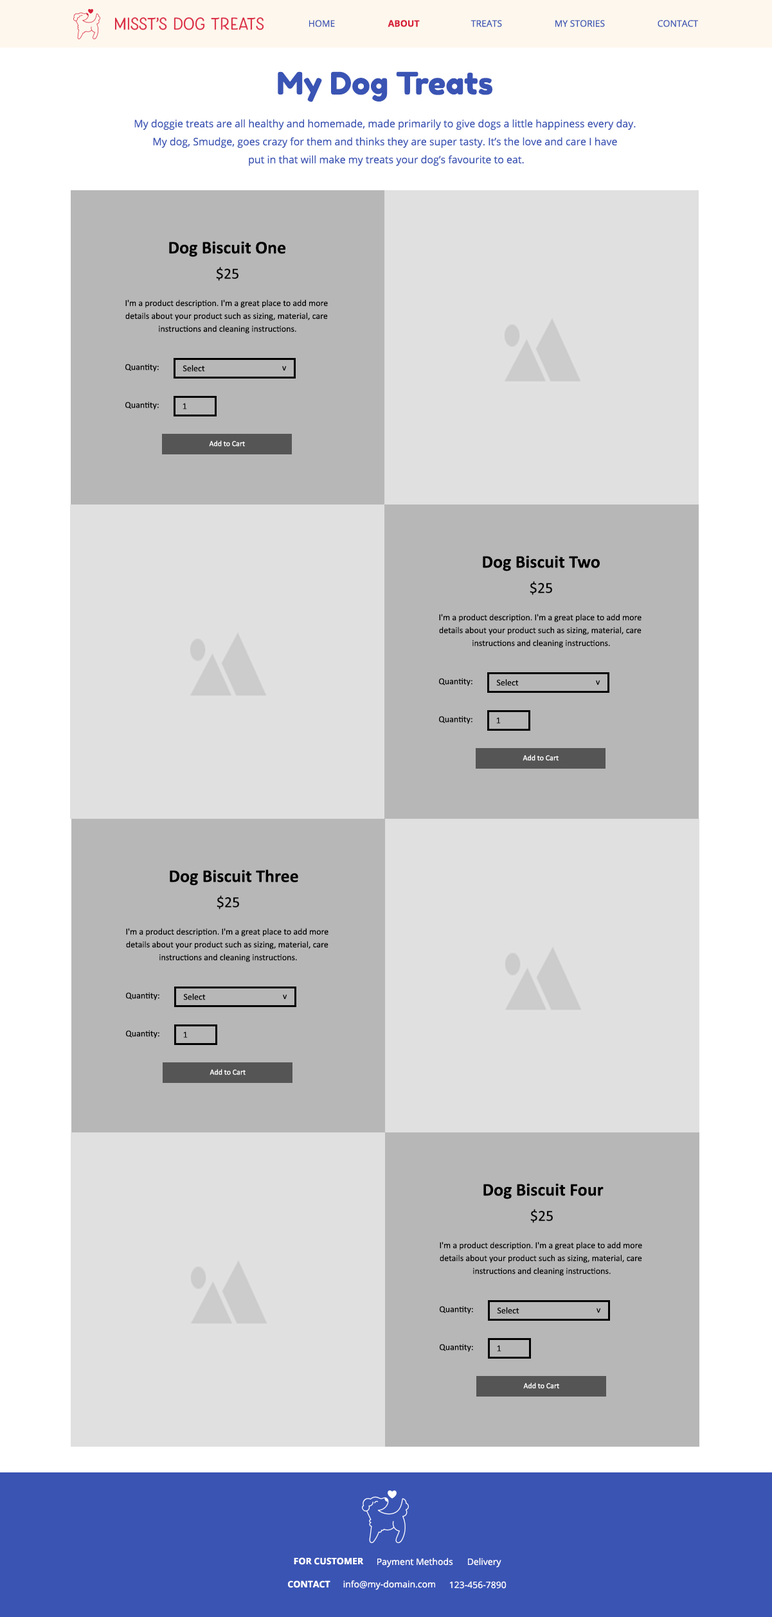
<style>
.page{position:relative;width:772px;height:1617px;background:#e0e0e0}
.page>*{position:absolute;margin:0}
.t1{font:9px "OpenSans-Regular";color:#3a54b4}
.t2{font:9px "OpenSans-Bold";color:#d71f38}
.t3{font:30.9px "FredokaOne-Regular";color:#3a54b4}
.t4{font:10.3px/18px "OpenSans-Regular";color:#3a54b4}
.t5{font:18px "Calibri-Bold";color:#000000}
.t6{font:15.4px "Calibri";color:#000000}
.t7{font:9px/12.9px "Calibri";color:#000000}
.t8{font:9px "Calibri";color:#000000}
.t9{font:7.7px "Calibri";color:#ffffff}
.t10{font:9px "OpenSans-Bold";color:#ffffff}
.t11{font:9px "OpenSans-Regular";color:#ffffff}
</style>
<div class="page">
<p class="t1" style="left:309px;top:20px;width:26px;height:7px">HOME</p>
<p class="t2" style="left:388px;top:20px;width:32px;height:7px">ABOUT</p>
<p class="t1" style="left:471px;top:20px;width:31px;height:7px">TREATS</p>
<p class="t1" style="left:555px;top:20px;width:50px;height:7px">MY STORIES</p>
<p class="t1" style="left:658px;top:20px;width:40px;height:7px">CONTACT</p>
<p class="t3" style="left:278px;top:71px;width:214px;height:31px">My Dog Treats</p>
<p class="t4" style="left:134px;top:119px;width:502px;height:47px;text-align:center">My doggie treats are all healthy and homemade, made primarily to give dogs a little happiness every day. <br>My dog, Smudge, goes crazy for them and thinks they are super tasty. It’s the love and care I have <br>put in that will make my treats your dog’s favourite to eat.</p>
<p class="t5" style="left:169px;top:241px;width:117px;height:16px">Dog Biscuit One</p>
<p class="t6" style="left:216px;top:267px;width:23px;height:14px">$25</p>
<p class="t7" style="left:125px;top:300px;width:203px;height:34px;text-align:center">I'm a product description. I'm a great place to add more <br>details about your product such as sizing, material, care <br>instructions and cleaning instructions.</p>
<p class="t8" style="left:125px;top:364px;width:34px;height:8px">Quantity:</p>
<p class="t8" style="left:183px;top:365px;width:22px;height:7px">Select</p>
<p class="t8" style="left:282px;top:366px;width:5px;height:5px">v</p>
<p class="t8" style="left:125px;top:402px;width:34px;height:8px">Quantity:</p>
<p class="t8" style="left:183px;top:403px;width:4px;height:7px">1</p>
<p class="t9" style="left:209px;top:440px;width:36px;height:7px">Add to Cart</p>
<p class="t5" style="left:483px;top:555px;width:117px;height:17px">Dog Biscuit Two</p>
<p class="t6" style="left:530px;top:581px;width:22px;height:14px">$25</p>
<p class="t7" style="left:439px;top:614px;width:203px;height:34px;text-align:center">I'm a product description. I'm a great place to add more <br>details about your product such as sizing, material, care <br>instructions and cleaning instructions.</p>
<p class="t8" style="left:439px;top:678px;width:34px;height:9px">Quantity:</p>
<p class="t8" style="left:496px;top:680px;width:23px;height:6px">Select</p>
<p class="t8" style="left:596px;top:680px;width:4px;height:5px">v</p>
<p class="t8" style="left:439px;top:716px;width:34px;height:8px">Quantity:</p>
<p class="t8" style="left:496px;top:717px;width:5px;height:7px">1</p>
<p class="t9" style="left:523px;top:755px;width:36px;height:6px">Add to Cart</p>
<p class="t5" style="left:170px;top:870px;width:128px;height:16px">Dog Biscuit Three</p>
<p class="t6" style="left:217px;top:896px;width:22px;height:14px">$25</p>
<p class="t7" style="left:126px;top:928px;width:202px;height:34px;text-align:center">I'm a product description. I'm a great place to add more <br>details about your product such as sizing, material, care <br>instructions and cleaning instructions.</p>
<p class="t8" style="left:126px;top:993px;width:33px;height:8px">Quantity:</p>
<p class="t8" style="left:183px;top:994px;width:23px;height:6px">Select</p>
<p class="t8" style="left:283px;top:995px;width:4px;height:5px">v</p>
<p class="t8" style="left:126px;top:1030px;width:33px;height:9px">Quantity:</p>
<p class="t8" style="left:183px;top:1032px;width:5px;height:6px">1</p>
<p class="t9" style="left:210px;top:1069px;width:36px;height:7px">Add to Cart</p>
<p class="t5" style="left:483px;top:1184px;width:121px;height:16px">Dog Biscuit Four</p>
<p class="t6" style="left:530px;top:1209px;width:23px;height:14px">$25</p>
<p class="t7" style="left:440px;top:1242px;width:202px;height:34px;text-align:center">I'm a product description. I'm a great place to add more <br>details about your product such as sizing, material, care <br>instructions and cleaning instructions.</p>
<p class="t8" style="left:440px;top:1306px;width:33px;height:9px">Quantity:</p>
<p class="t8" style="left:497px;top:1308px;width:22px;height:6px">Select</p>
<p class="t8" style="left:597px;top:1308px;width:4px;height:5px">v</p>
<p class="t8" style="left:440px;top:1344px;width:33px;height:9px">Quantity:</p>
<p class="t8" style="left:497px;top:1346px;width:4px;height:6px">1</p>
<p class="t9" style="left:523px;top:1383px;width:36px;height:6px">Add to Cart</p>
<p class="t10" style="left:294px;top:1558px;width:70px;height:7px">FOR CUSTOMER</p>
<p class="t11" style="left:377px;top:1558px;width:76px;height:10px">Payment Methods</p>
<p class="t11" style="left:468px;top:1558px;width:33px;height:10px">Delivery</p>
<p class="t10" style="left:288px;top:1581px;width:42px;height:8px">CONTACT</p>
<p class="t11" style="left:343px;top:1581px;width:92px;height:9px">info@my-domain.com</p>
<p class="t11" style="left:449px;top:1581px;width:58px;height:8px">123-456-7890</p>
</div>
